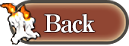
<style>
.page{position:relative;width:129px;height:46px}
.page>*{position:absolute;margin:0}
.t1{font:24px "RyuminPro-ExBold";letter-spacing:-0.08em;color:#ffffff}
</style>
<div class="page">
<p class="t1" style="left:44px;top:14px;width:51px;height:19px">Back</p>
</div>
